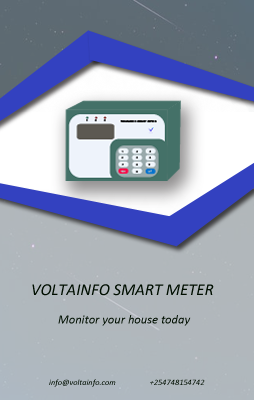
<style>
.page{position:relative;width:254px;height:400px}
.page>*{position:absolute;margin:0}
.t1{font:16.7px "Calibri-Italic";color:#000e00}
.t2{font:12.5px "Calibri-Italic";color:#000e00}
.t3{font:8.3px "Calibri-Italic"}
.t4{font:8.3px "Calibri-Italic";color:#000e00}
</style>
<div class="page">
<p class="t1" style="left:32px;top:284px;width:182px;height:12px">VOLTAINFO SMART METER</p>
<p class="t2" style="left:58px;top:315px;width:133px;height:11px">Monitor your house today</p>
<p class="t3" style="left:49px;top:379px;width:67px;height:8px">info@voltainfo.com</p>
<p class="t4" style="left:150px;top:379px;width:55px;height:6px">+254748154742</p>
</div>
